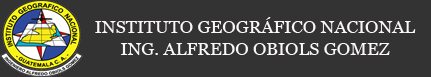
<style>
.page{position:relative;width:431px;height:77px;background:#333333}
.page>*{position:absolute;margin:0}
.t1{font:18px "Vani";color:#fdf8f8}
.t2{font:30px "Tahoma";color:#000000}
</style>
<div class="page">
<p class="t1" style="left:95px;top:17px;width:321px;height:38px;text-align:center"><span class="t2"><br></span>INSTITUTO GEOGRÁFICO NACIONAL<br>ING. ALFREDO OBIOLS GOMEZ</p>
</div>
